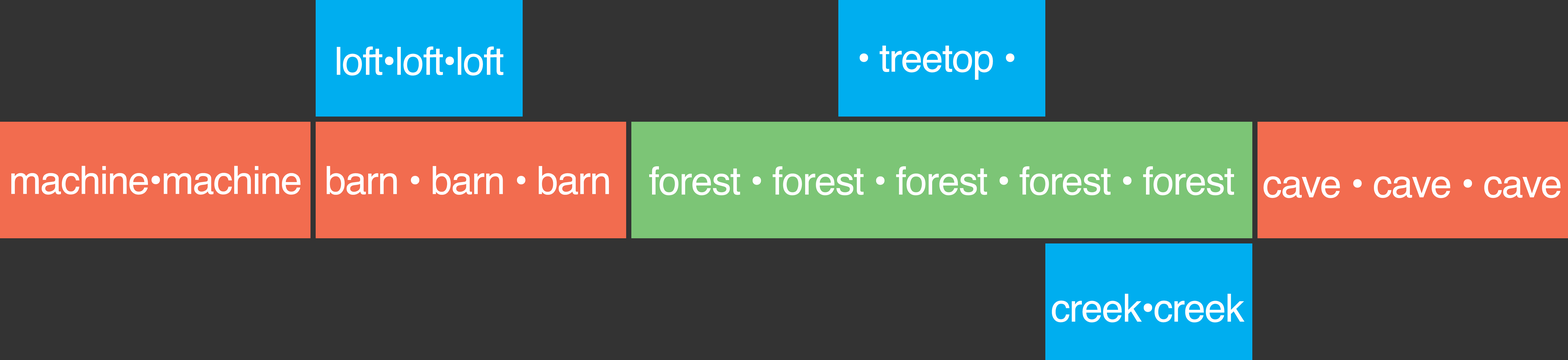
<style>
.page{position:relative;width:1568px;height:360px;background:#333333}
.page>*{position:absolute;margin:0}
.t1{font:38.8px "Helvetica";letter-spacing:-0.025em;color:#ffffff}
</style>
<div class="page">
<p class="t1" style="left:337px;top:46px;width:167px;height:30px">loft•loft•loft</p>
<p class="t1" style="left:860px;top:46px;width:155px;height:34px">• treetop •</p>
<p class="t1" style="left:11px;top:166px;width:290px;height:29px">machine•machine</p>
<p class="t1" style="left:327px;top:166px;width:282px;height:29px">barn • barn • barn</p>
<p class="t1" style="left:649px;top:166px;width:585px;height:29px">forest • forest • forest • forest • forest</p>
<p class="t1" style="left:1263px;top:176px;width:298px;height:22px">cave • cave • cave</p>
<p class="t1" style="left:1052px;top:293px;width:193px;height:29px">creek•creek</p>
</div>
